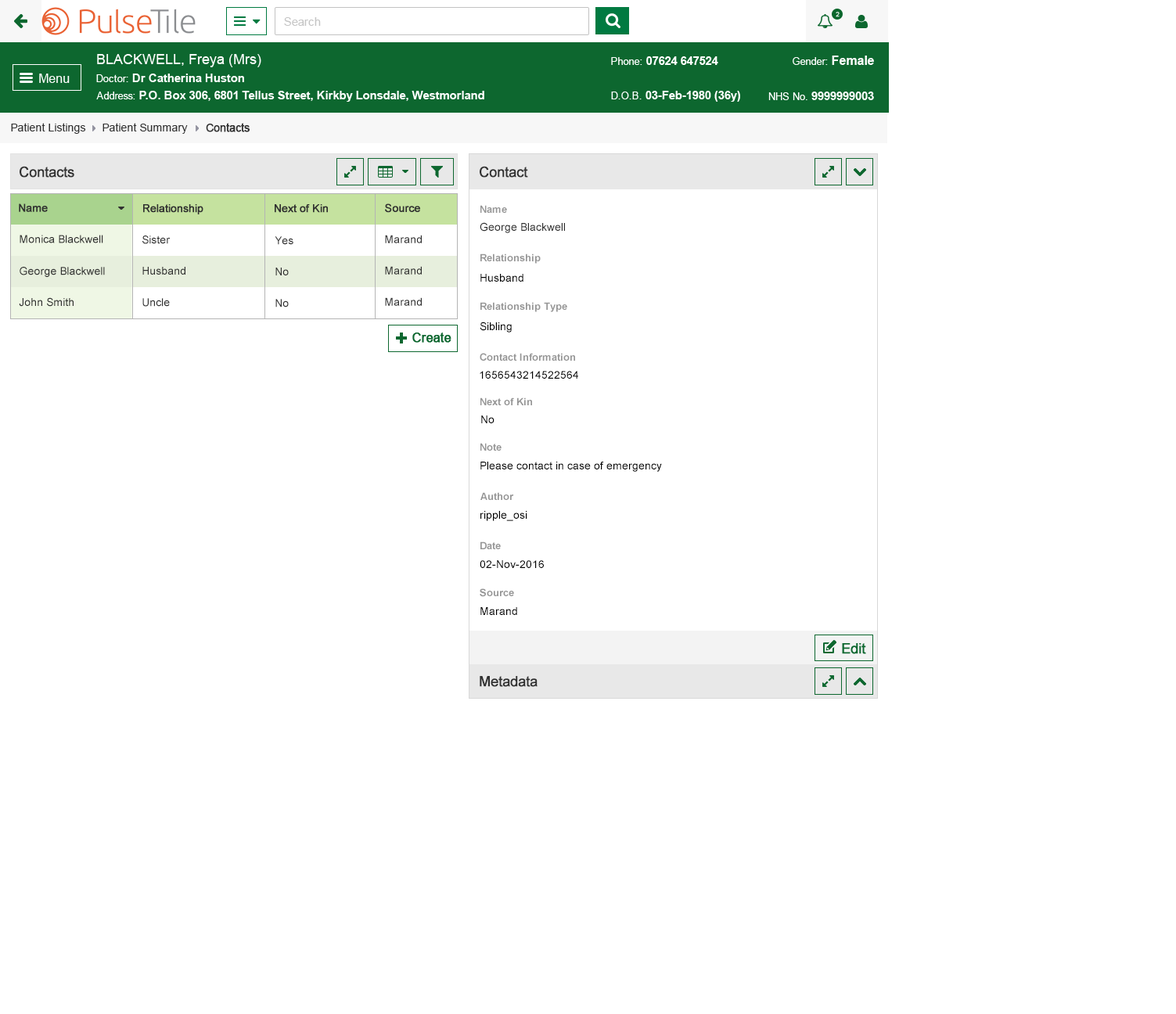
<style>
.page{position:relative;width:1176px;height:1014px;background:#ffffff}
.page>*{position:absolute;margin:0}
.t1{font:11px "ArialMT";color:#313131}
.t2{font:11px "ArialMT";color:#313131;font-weight:bold}
.t3{font:14.1px "ArialMT";color:#303030;font-weight:bold}
.t4{font:11px "ArialMT";color:#303030;font-weight:bold}
.t5{font:10.2px "Arial-BoldMT";color:#959595}
.t6{font:11px "ArialMT";color:#303030}
.t7{font:11px "ArialMT";color:#000000}
</style>
<div class="page">
<p class="t1" style="left:11px;top:123px;width:75px;height:11px">Patient Listings</p>
<p class="t1" style="left:102px;top:123px;width:86px;height:11px">Patient Summary</p>
<p class="t2" style="left:206px;top:123px;width:44px;height:9px">Contacts</p>
<p class="t3" style="left:20px;top:166px;width:54px;height:12px">Contacts</p>
<p class="t3" style="left:480px;top:166px;width:48px;height:12px">Contact</p>
<p class="t4" style="left:19px;top:203px;width:29px;height:9px">Name</p>
<p class="t4" style="left:143px;top:204px;width:60px;height:10px">Relationship</p>
<p class="t4" style="left:275px;top:204px;width:53px;height:9px">Next of Kin</p>
<p class="t4" style="left:385px;top:203px;width:35px;height:10px">Source</p>
<p class="t5" style="left:480px;top:205px;width:27px;height:8px">Name</p>
<p class="t6" style="left:480px;top:222px;width:85px;height:11px">George Blackwell</p>
<p class="t6" style="left:20px;top:235px;width:83px;height:8px">Monica Blackwell</p>
<p class="t6" style="left:142px;top:236px;width:29px;height:8px">Sister</p>
<p class="t6" style="left:275px;top:236px;width:18px;height:9px">Yes</p>
<p class="t6" style="left:385px;top:235px;width:37px;height:8px">Marand</p>
<p class="t5" style="left:480px;top:254px;width:61px;height:10px">Relationship</p>
<p class="t6" style="left:20px;top:267px;width:85px;height:10px">George Blackwell</p>
<p class="t6" style="left:142px;top:267px;width:43px;height:8px">Husband</p>
<p class="t6" style="left:275px;top:268px;width:14px;height:7px">No</p>
<p class="t6" style="left:385px;top:266px;width:37px;height:9px">Marand</p>
<p class="t7" style="left:480px;top:274px;width:43px;height:8px">Husband</p>
<p class="t6" style="left:19px;top:297px;width:55px;height:10px">John Smith</p>
<p class="t6" style="left:142px;top:298px;width:28px;height:9px">Uncle</p>
<p class="t6" style="left:275px;top:299px;width:14px;height:8px">No</p>
<p class="t6" style="left:385px;top:297px;width:37px;height:9px">Marand</p>
<p class="t5" style="left:480px;top:302px;width:87px;height:10px">Relationship Type</p>
<p class="t7" style="left:480px;top:322px;width:32px;height:11px">Sibling</p>
<p class="t5" style="left:480px;top:353px;width:95px;height:8px">Contact Information</p>
<p class="t7" style="left:480px;top:371px;width:98px;height:8px">1656543214522564</p>
<p class="t5" style="left:480px;top:397px;width:52px;height:8px">Next of Kin</p>
<p class="t7" style="left:481px;top:415px;width:13px;height:8px">No</p>
<p class="t5" style="left:480px;top:443px;width:22px;height:8px">Note</p>
<p class="t7" style="left:480px;top:462px;width:182px;height:10px">Please contact in case of emergency</p>
<p class="t5" style="left:480px;top:492px;width:34px;height:8px">Author</p>
<p class="t7" style="left:480px;top:511px;width:47px;height:10px">ripple_osi</p>
<p class="t5" style="left:480px;top:541px;width:21px;height:8px">Date</p>
<p class="t7" style="left:480px;top:560px;width:64px;height:8px">02-Nov-2016</p>
<p class="t5" style="left:480px;top:588px;width:34px;height:9px">Source</p>
<p class="t7" style="left:480px;top:607px;width:37px;height:8px">Marand</p>
<p class="t3" style="left:480px;top:676px;width:58px;height:11px">Metadata</p>
</div>
